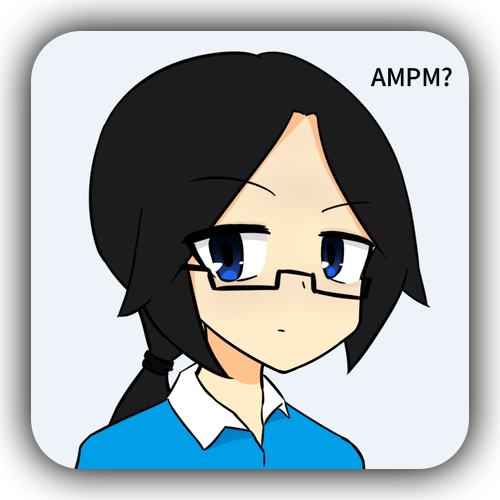
<style>
.page{position:relative;width:500px;height:500px;background:#eef3fa}
.page>*{position:absolute;margin:0}
.t1{font:24px "SourceHanSansSCVF-Medium";color:#000000}
</style>
<div class="page">
<p class="t1" style="left:370px;top:67px;width:82px;height:20px">AMPM?</p>
</div>
